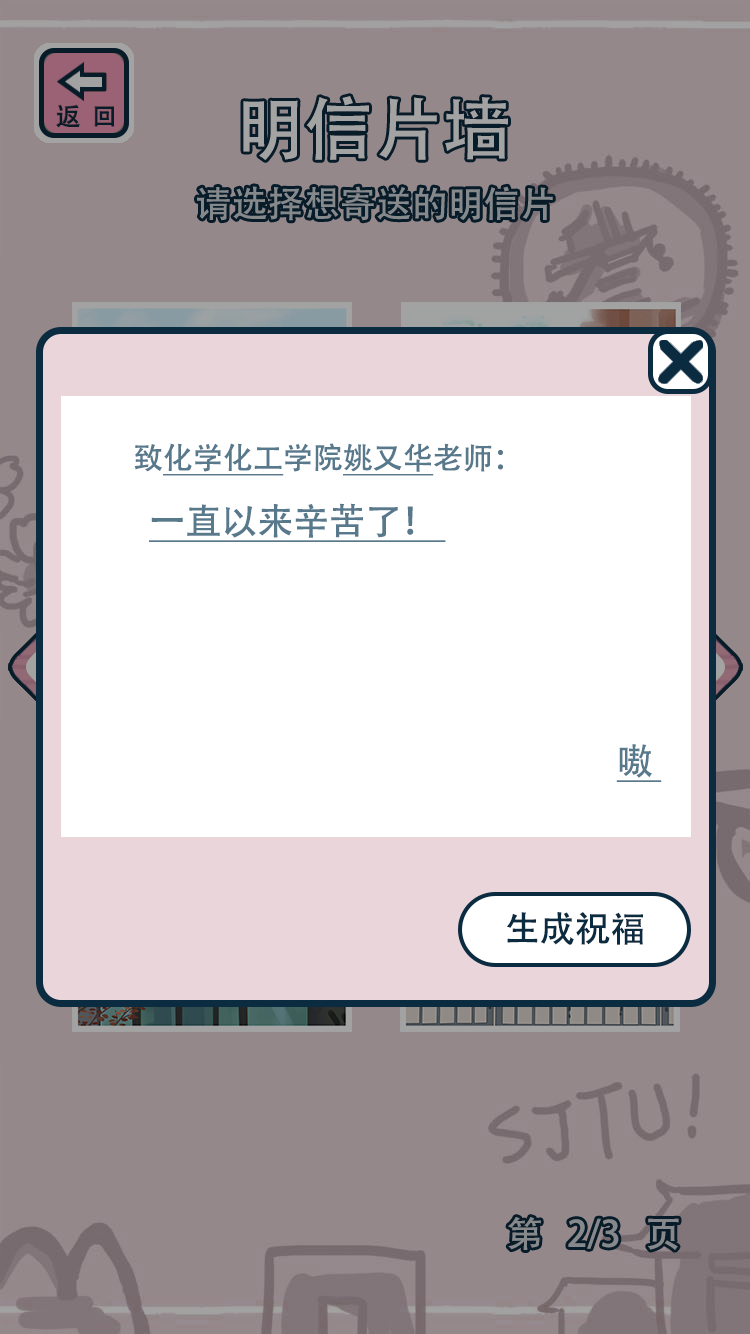
<style>
.page{position:relative;width:750px;height:1334px;background:#95888b}
.page>*{position:absolute;margin:0}
.t1{font:30px "AdobeHeitiStd-Regular";color:#58788c;text-decoration:underline}
.t2{font:30px "AdobeHeitiStd-Regular";color:#58788c}
.t3{font:36px/60px "AdobeHeitiStd-Regular";color:#58788c;text-decoration:underline}
.t4{font:30px/60px "AdobeHeitiStd-Regular";color:#d2d6d9}
.t5{font:35.5px "AdobeHeitiStd-Regular";color:#0b2b40}
.t6{font:36px "AdobeHeitiStd-Regular";color:#86898b}
</style>
<div class="page">
<p class="t1" style="left:134px;top:443px;width:369px;height:33px"><span class="t2">致</span>化学化工<span class="t2">学院</span>姚又华<span class="t2">老师：</span></p>
<p class="t3" style="left:149px;top:503px;width:513px;height:279px"><span class="t4"> <br></span>一直以来辛苦了！ <br><br><br>        <br>   嗷</p>
<p class="t5" style="left:507px;top:912px;width:136px;height:33px">生成祝福</p>
<p class="t6" style="left:508px;top:1217px;width:171px;height:33px">第   2/3   页</p>
</div>
